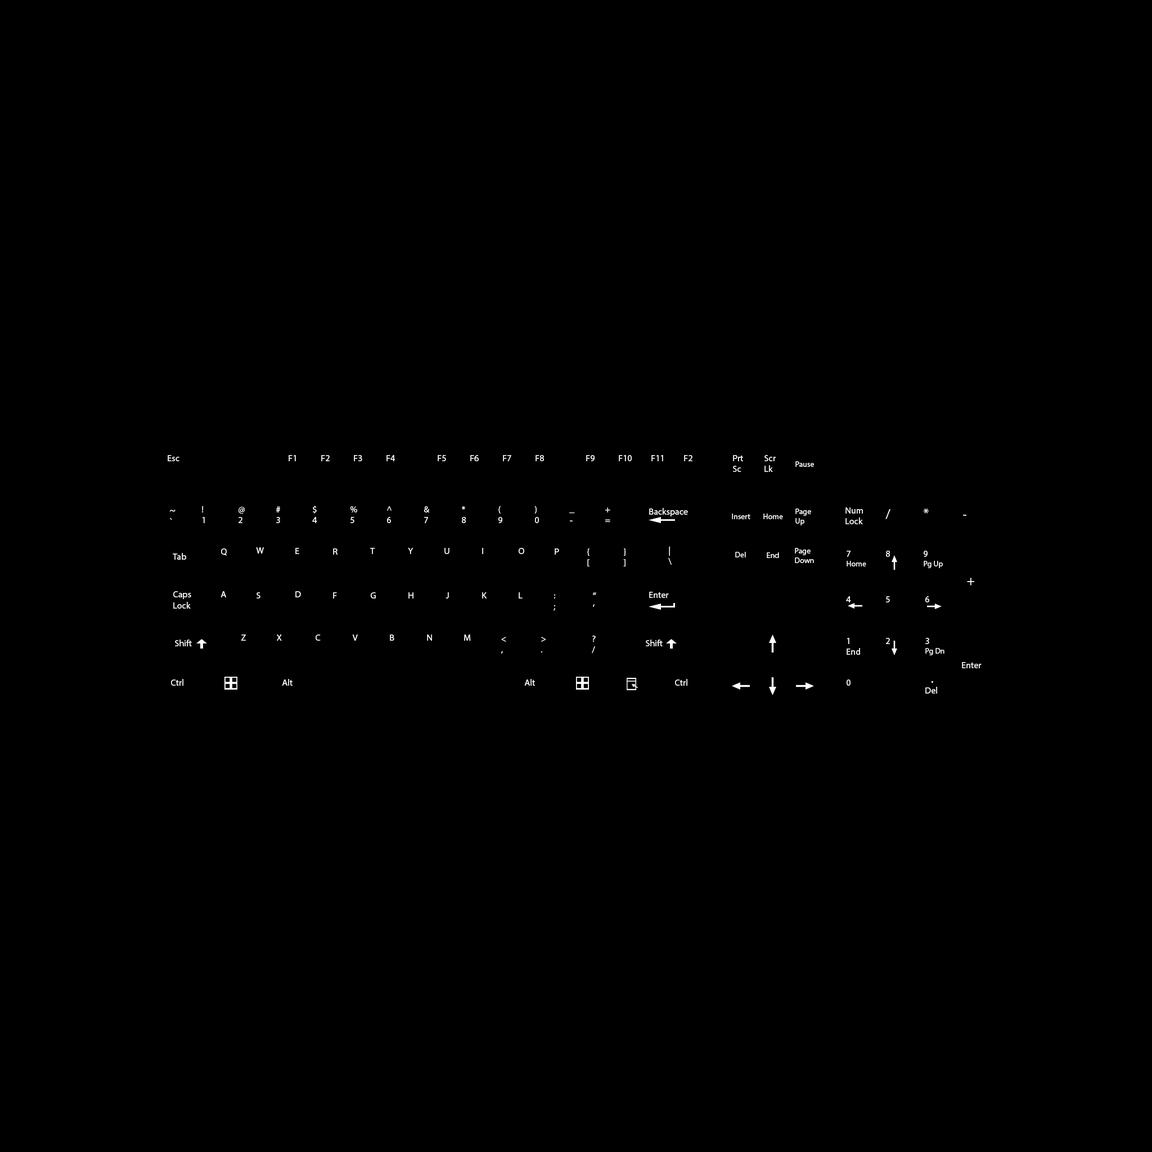
<style>
.page{position:relative;width:1152px;height:1152px;background:#000000}
.page>*{position:absolute;margin:0}
.t1{font:9px "MyriadPro-Regular";color:#ffffff}
.t2{font:7.9px "MyriadPro-Regular";color:#ffffff}
.t3{font:10.1px "MyriadPro-Regular";color:#ffffff}
.t4{font:13.5px "MyriadPro-Regular";color:#ffffff}
</style>
<div class="page">
<p class="t1" style="left:168px;top:455px;width:11px;height:6px">Esc</p>
<p class="t1" style="left:289px;top:455px;width:7px;height:6px">F1</p>
<p class="t1" style="left:321px;top:455px;width:9px;height:6px">F2</p>
<p class="t1" style="left:354px;top:455px;width:8px;height:6px">F3</p>
<p class="t1" style="left:386px;top:455px;width:9px;height:6px">F4</p>
<p class="t1" style="left:438px;top:455px;width:8px;height:6px">F5</p>
<p class="t1" style="left:470px;top:455px;width:9px;height:6px">F6</p>
<p class="t1" style="left:503px;top:455px;width:8px;height:6px">F7</p>
<p class="t1" style="left:536px;top:455px;width:8px;height:6px">F8</p>
<p class="t1" style="left:586px;top:455px;width:9px;height:6px">F9</p>
<p class="t1" style="left:619px;top:455px;width:13px;height:6px">F10</p>
<p class="t1" style="left:651px;top:455px;width:12px;height:6px">F11</p>
<p class="t1" style="left:684px;top:455px;width:8px;height:6px">F2</p>
<p class="t1" style="left:733px;top:455px;width:10px;height:17px">Prt<br>Sc</p>
<p class="t1" style="left:764px;top:455px;width:12px;height:17px">Scr<br>Lk</p>
<p class="t2" style="left:795px;top:461px;width:19px;height:6px">Pause</p>
<p class="t3" style="left:170px;top:510px;width:6px;height:10px">~<br>`</p>
<p class="t1" style="left:202px;top:506px;width:3px;height:17px">!<br>1</p>
<p class="t1" style="left:238px;top:507px;width:7px;height:16px">@<br>2</p>
<p class="t1" style="left:276px;top:506px;width:4px;height:17px">#<br>3</p>
<p class="t1" style="left:312px;top:506px;width:5px;height:17px">$<br>4</p>
<p class="t1" style="left:350px;top:506px;width:7px;height:17px">%<br>5</p>
<p class="t1" style="left:387px;top:506px;width:5px;height:17px">^<br>6</p>
<p class="t1" style="left:424px;top:506px;width:6px;height:17px">&amp;<br>7</p>
<p class="t1" style="left:462px;top:506px;width:4px;height:17px">*<br>8</p>
<p class="t1" style="left:498px;top:506px;width:4px;height:17px">(<br>9</p>
<p class="t1" style="left:534px;top:506px;width:5px;height:17px">)<br>0</p>
<p class="t1" style="left:605px;top:507px;width:5px;height:15px">+<br>=</p>
<p class="t1" style="left:649px;top:508px;width:39px;height:8px">Backspace</p>
<p class="t2" style="left:795px;top:508px;width:16px;height:17px">Page<br>Up</p>
<p class="t1" style="left:845px;top:507px;width:18px;height:17px">Num<br>Lock</p>
<p class="t4" style="left:885px;top:509px;width:5px;height:10px">/</p>
<p class="t4" style="left:924px;top:508px;width:5px;height:6px">*</p>
<p class="t3" style="left:569px;top:512px;width:6px;height:9px">_<br>-</p>
<p class="t2" style="left:732px;top:514px;width:18px;height:5px">Insert</p>
<p class="t2" style="left:763px;top:514px;width:20px;height:5px">Home</p>
<p class="t4" style="left:963px;top:515px;width:4px;height:1px">-</p>
<p class="t1" style="left:173px;top:553px;width:13px;height:7px">Tab</p>
<p class="t1" style="left:221px;top:548px;width:6px;height:8px">Q</p>
<p class="t1" style="left:256px;top:547px;width:8px;height:7px">W</p>
<p class="t1" style="left:295px;top:548px;width:4px;height:6px">E</p>
<p class="t1" style="left:333px;top:548px;width:5px;height:7px">R</p>
<p class="t1" style="left:370px;top:548px;width:5px;height:6px">T</p>
<p class="t1" style="left:408px;top:548px;width:5px;height:6px">Y</p>
<p class="t1" style="left:444px;top:548px;width:5px;height:6px">U</p>
<p class="t1" style="left:482px;top:548px;width:1px;height:6px">I</p>
<p class="t1" style="left:519px;top:548px;width:5px;height:6px">O</p>
<p class="t1" style="left:555px;top:548px;width:4px;height:7px">P</p>
<p class="t1" style="left:587px;top:548px;width:3px;height:18px">{<br>[</p>
<p class="t1" style="left:623px;top:548px;width:3px;height:18px">}<br>]</p>
<p class="t1" style="left:668px;top:546px;width:4px;height:19px">|<br>\</p>
<p class="t2" style="left:735px;top:552px;width:11px;height:5px">Del</p>
<p class="t2" style="left:767px;top:552px;width:12px;height:6px">End</p>
<p class="t2" style="left:795px;top:548px;width:19px;height:15px">Page<br>Down</p>
<p class="t2" style="left:847px;top:551px;width:19px;height:15px"><span class="t1">7<br></span>Home</p>
<p class="t1" style="left:886px;top:551px;width:4px;height:6px">8</p>
<p class="t2" style="left:924px;top:551px;width:19px;height:17px"><span class="t1">9<br></span>Pg Up</p>
<p class="t4" style="left:967px;top:578px;width:8px;height:8px">+</p>
<p class="t1" style="left:173px;top:591px;width:18px;height:18px">Caps <br>Lock</p>
<p class="t1" style="left:220px;top:591px;width:6px;height:6px">A</p>
<p class="t1" style="left:256px;top:592px;width:4px;height:6px">S</p>
<p class="t1" style="left:295px;top:591px;width:6px;height:6px">D</p>
<p class="t1" style="left:333px;top:592px;width:4px;height:6px">F</p>
<p class="t1" style="left:371px;top:592px;width:5px;height:6px">G</p>
<p class="t1" style="left:408px;top:592px;width:5px;height:6px">H</p>
<p class="t1" style="left:446px;top:592px;width:3px;height:6px">J</p>
<p class="t1" style="left:482px;top:592px;width:5px;height:6px">K</p>
<p class="t1" style="left:519px;top:592px;width:4px;height:6px">L</p>
<p class="t3" style="left:593px;top:592px;width:3px;height:15px">“<br>‘</p>
<p class="t1" style="left:649px;top:592px;width:20px;height:6px">Enter</p>
<p class="t1" style="left:554px;top:594px;width:2px;height:17px">:<br>;</p>
<p class="t1" style="left:846px;top:596px;width:5px;height:6px">4</p>
<p class="t1" style="left:886px;top:596px;width:4px;height:6px">5</p>
<p class="t1" style="left:925px;top:596px;width:4px;height:6px">6</p>
<p class="t1" style="left:175px;top:640px;width:17px;height:6px">Shift</p>
<p class="t1" style="left:241px;top:634px;width:5px;height:7px">Z</p>
<p class="t1" style="left:277px;top:634px;width:5px;height:7px">X</p>
<p class="t1" style="left:316px;top:634px;width:5px;height:7px">C</p>
<p class="t1" style="left:353px;top:634px;width:5px;height:7px">V</p>
<p class="t1" style="left:390px;top:634px;width:4px;height:7px">B</p>
<p class="t1" style="left:427px;top:634px;width:5px;height:7px">N</p>
<p class="t1" style="left:464px;top:634px;width:7px;height:7px">M</p>
<p class="t1" style="left:501px;top:637px;width:5px;height:17px">&lt;<br>,</p>
<p class="t1" style="left:541px;top:637px;width:5px;height:15px">&gt;<br>.</p>
<p class="t1" style="left:592px;top:636px;width:4px;height:17px">?<br>/</p>
<p class="t1" style="left:646px;top:640px;width:17px;height:6px">Shift</p>
<p class="t1" style="left:847px;top:638px;width:13px;height:17px">1<br>End</p>
<p class="t1" style="left:886px;top:638px;width:4px;height:6px">2</p>
<p class="t2" style="left:925px;top:638px;width:19px;height:17px"><span class="t1">3<br></span>Pg Dn</p>
<p class="t1" style="left:962px;top:662px;width:20px;height:6px">Enter</p>
<p class="t1" style="left:171px;top:679px;width:12px;height:7px">Ctrl</p>
<p class="t1" style="left:282px;top:679px;width:10px;height:7px">Alt</p>
<p class="t1" style="left:524px;top:679px;width:11px;height:7px">Alt</p>
<p class="t1" style="left:675px;top:679px;width:12px;height:7px">Ctrl</p>
<p class="t1" style="left:847px;top:680px;width:3px;height:6px">0</p>
<p class="t1" style="left:925px;top:681px;width:12px;height:13px"><span class="t4">  .<br></span>Del</p>
</div>
